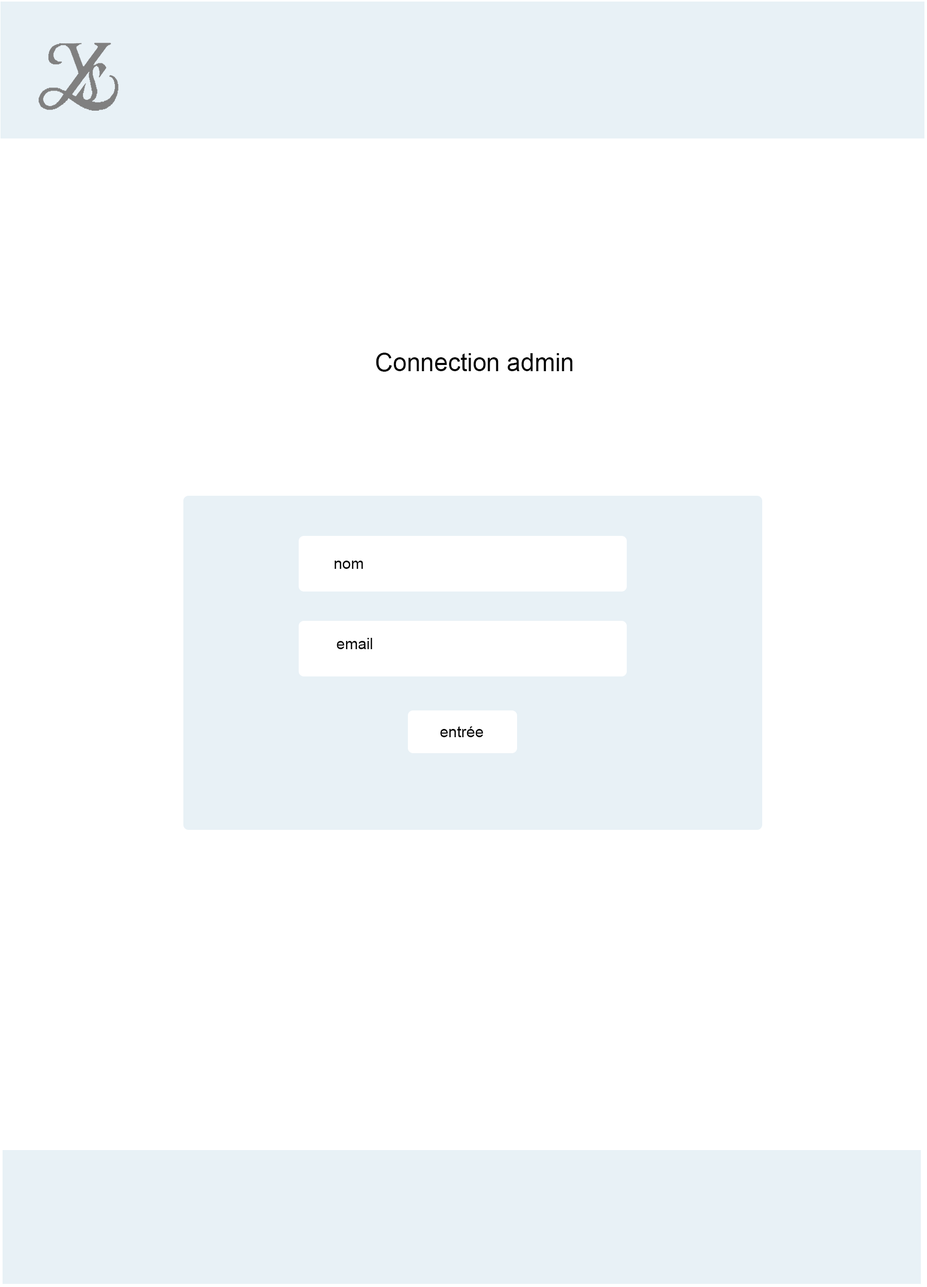
<style>
.page{position:relative;width:927px;height:1287px;background:#ffffff}
.page>*{position:absolute;margin:0}
.t1{font:24.7px "ArialMT";color:#050505}
.t2{font:15.4px "ArialMT";color:#050505}
</style>
<div class="page">
<p class="t1" style="left:376px;top:353px;width:196px;height:19px">Connection admin</p>
<p class="t2" style="left:334px;top:561px;width:29px;height:8px">nom</p>
<p class="t2" style="left:337px;top:638px;width:35px;height:11px">email</p>
<p class="t2" style="left:440px;top:726px;width:43px;height:11px">entrée</p>
</div>
